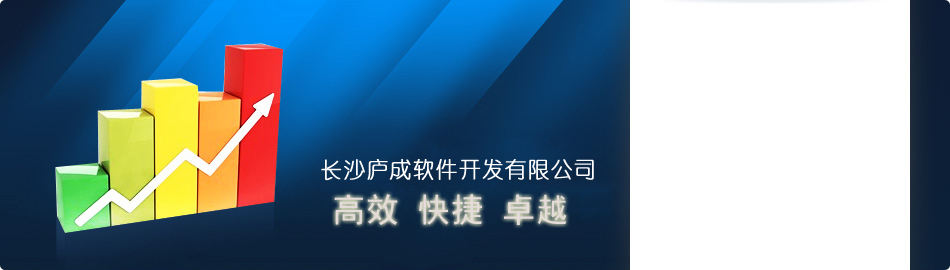
<style>
.page{position:relative;width:950px;height:270px;background:#ffffff}
.page>*{position:absolute;margin:0}
.t1{font:22.2px "YouYuan";letter-spacing:0.05em;color:#fefdfd;text-transform:uppercase;font-weight:bold;scale:0.96 1}
.t2{font:33.3px "SimHei";letter-spacing:0.05em;color:#e5dbdb;text-transform:uppercase;scale:0.96 1}
</style>
<div class="page">
<p class="t1" style="left:321px;top:159px;width:273px;height:22px">长沙庐成软件开发有限公司</p>
<p class="t2" style="left:334px;top:194px;width:233px;height:31px">高效 快捷 卓越</p>
</div>
